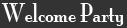
<style>
.page{position:relative;width:127px;height:28px;background:#333333}
.page>*{position:absolute;margin:0}
.t1{font:24px "MonaLisaSolidITCTT";color:#fefefe}
</style>
<div class="page">
<p class="t1" style="left:1px;top:3px;width:123px;height:23px">Welcome Party</p>
</div>
